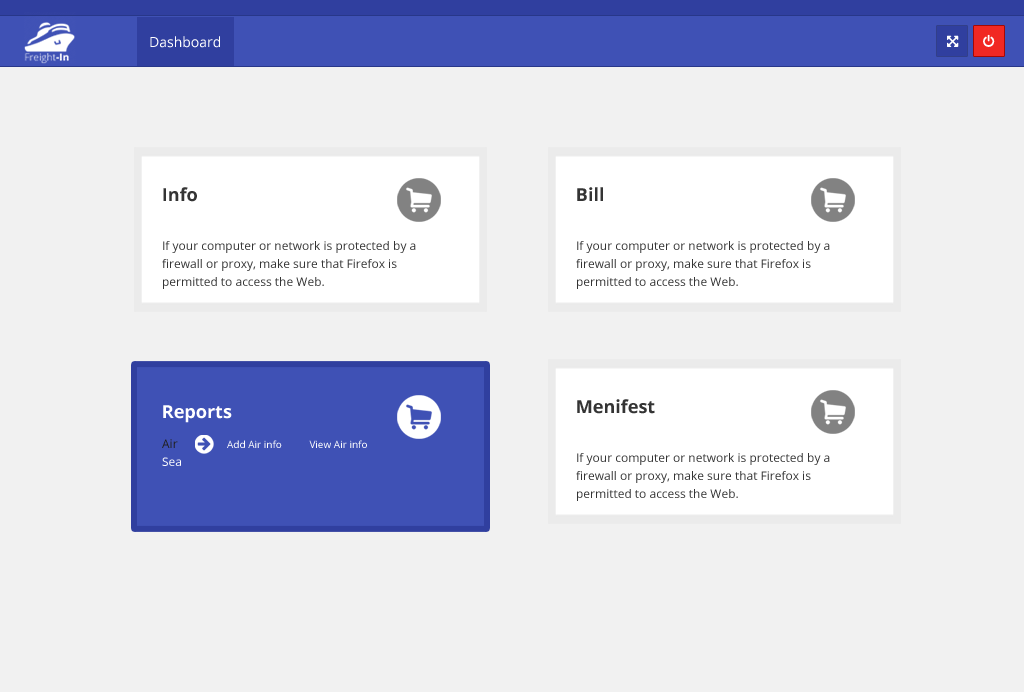
<style>
.page{position:relative;width:1024px;height:692px;background:#f1f1f1}
.page>*{position:absolute;margin:0}
.t1{font:14px "OpenSans";color:#ffffff}
.t2{font:18px "OpenSans-Bold";color:#343434}
.t3{font:12px/18px "OpenSans";color:#343434}
.t4{font:18px "OpenSans-Bold";color:#ffffff}
.t5{font:12px/18px "OpenSans";color:#212020}
.t6{font:12px/18px "OpenSans";color:#ffffff}
.t7{font:10px "OpenSans";color:#ffffff}
</style>
<div class="page">
<p class="t1" style="left:150px;top:36px;width:70px;height:12px">Dashboard</p>
<p class="t2" style="left:163px;top:187px;width:34px;height:15px">Info</p>
<p class="t2" style="left:577px;top:187px;width:26px;height:14px">Bill</p>
<p class="t3" style="left:162px;top:241px;width:254px;height:48px">If your computer or network is protected by a firewall or proxy, make sure that Firefox is permitted to access the Web.</p>
<p class="t3" style="left:576px;top:241px;width:254px;height:48px">If your computer or network is protected by a firewall or proxy, make sure that Firefox is permitted to access the Web.</p>
<p class="t2" style="left:577px;top:399px;width:78px;height:15px">Menifest</p>
<p class="t4" style="left:163px;top:405px;width:69px;height:18px">Reports</p>
<p class="t5" style="left:162px;top:439px;width:19px;height:27px">Air<br><span class="t6">Sea</span></p>
<p class="t7" style="left:227px;top:440px;width:140px;height:8px">Add Air info     View Air info</p>
<p class="t3" style="left:576px;top:453px;width:254px;height:48px">If your computer or network is protected by a firewall or proxy, make sure that Firefox is permitted to access the Web.</p>
</div>
